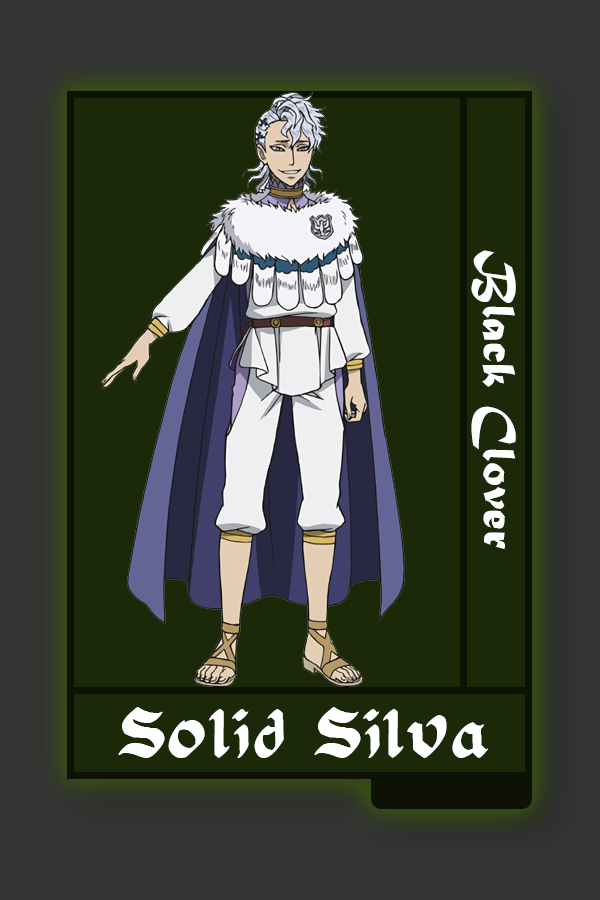
<style>
.page{position:relative;width:600px;height:900px;background:#1b2908}
.page>*{position:absolute;margin:0}
.t1{font:48.8px "MaturaMTScriptCapitals";color:#ffffff}
.t2{font:60.3px "FloranteatLaura";color:#ffffff}
</style>
<div class="page">
<p class="t1" style="left:471px;top:250px;width:45px;height:299px;rotate:90deg">Black Clover</p>
<p class="t2" style="left:118px;top:707px;width:371px;height:51px">Solid Silva</p>
</div>
